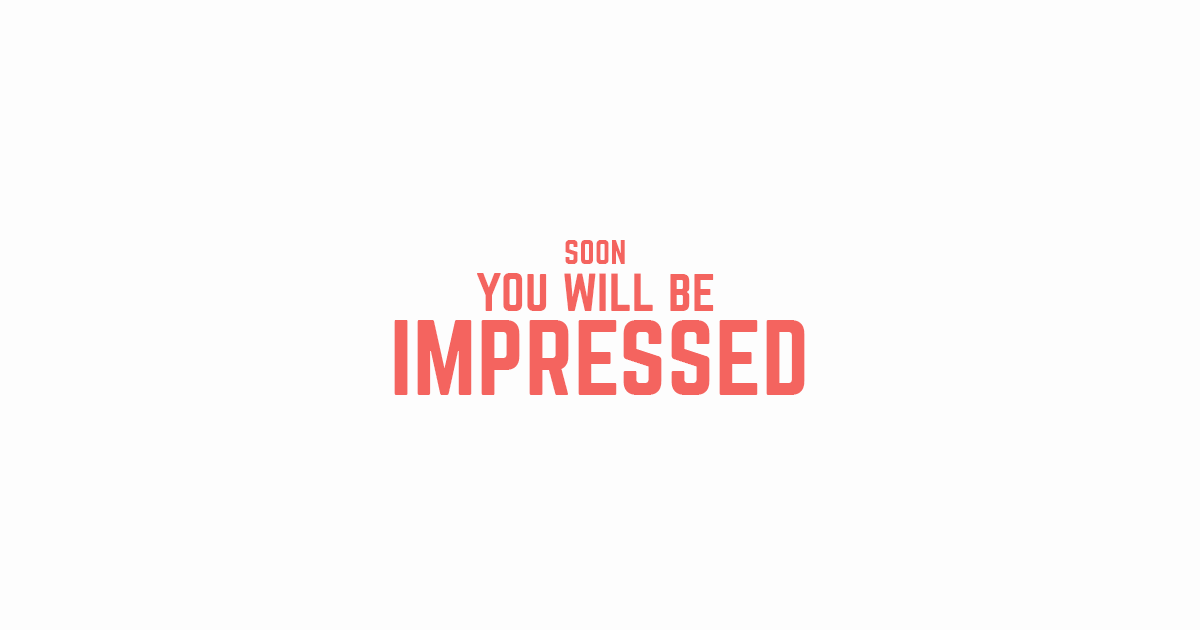
<style>
.page{position:relative;width:1200px;height:630px;background:#fdfdfd}
.page>*{position:absolute;margin:0}
.t1{font:29.9px "Norwester-Regular";letter-spacing:0.013em;color:#f4645f;text-transform:uppercase}
.t2{font:47px "Norwester-Regular";letter-spacing:0.013em;color:#f4645f;text-transform:uppercase}
.t3{font:93.7px "Norwester-Regular";letter-spacing:0.013em;color:#f4645f;text-transform:uppercase}
</style>
<div class="page">
<p class="t1" style="left:565px;top:240px;width:60px;height:24px">soon</p>
<p class="t2" style="left:477px;top:273px;width:237px;height:38px">you will be</p>
<p class="t3" style="left:394px;top:320px;width:411px;height:75px">impressed</p>
</div>
